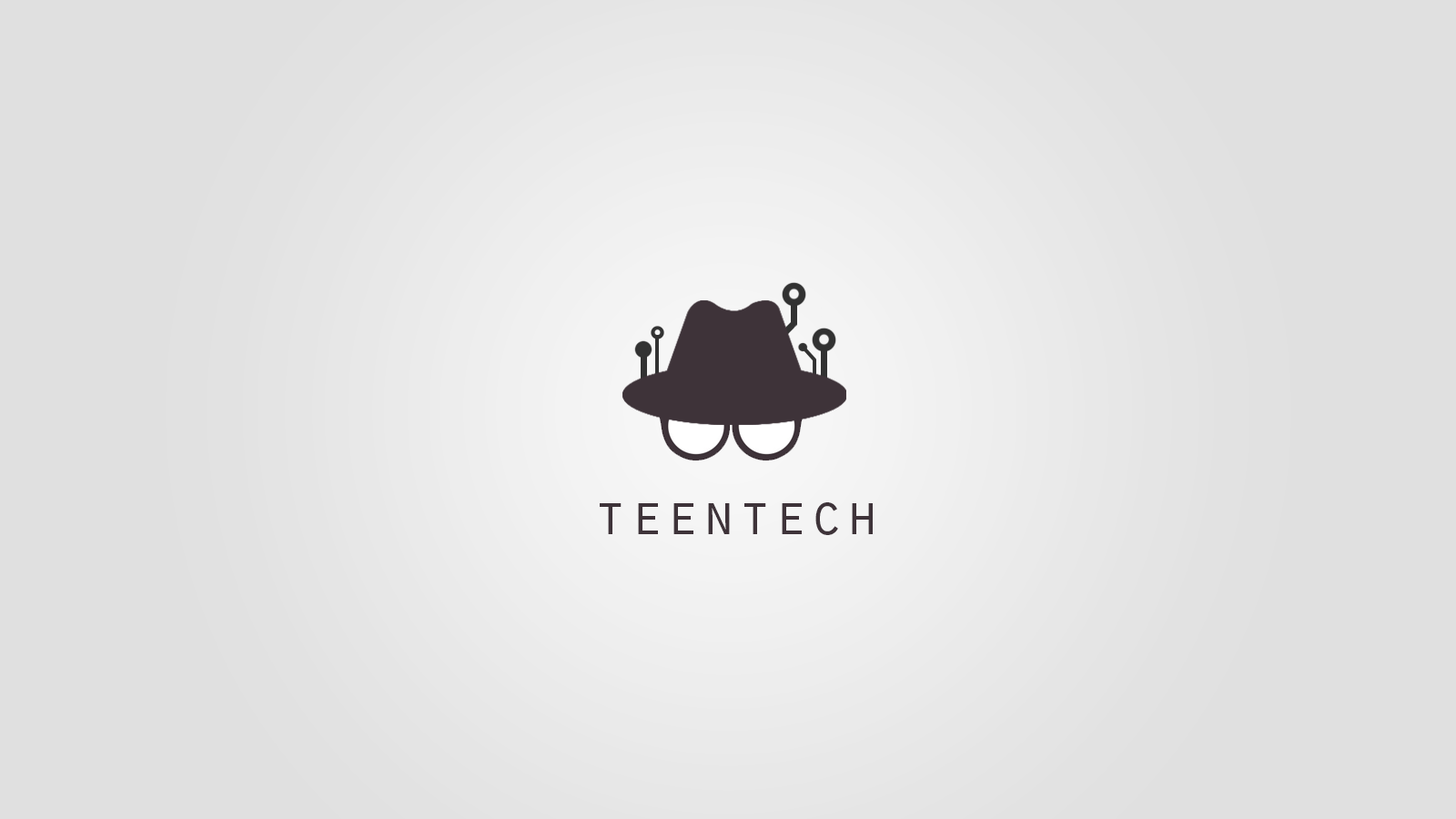
<style>
.page{position:relative;width:1456px;height:819px;background:#e0e0e0}
.page>*{position:absolute;margin:0}
.t1{font:60.2px "OratorStd";color:#3e3339}
</style>
<div class="page">
<p class="t1" style="left:600px;top:502px;width:273px;height:33px">teentech</p>
</div>
